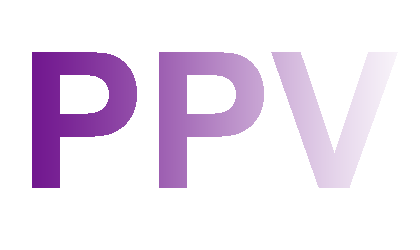
<style>
.page{position:relative;width:420px;height:250px;background:#ffffff}
.page>*{position:absolute;margin:0}
.t1{font:190px "Arial-BoldMT"}
</style>
<div class="page">
<p class="t1" style="left:32px;top:52px;width:366px;height:136px">PPV</p>
</div>
